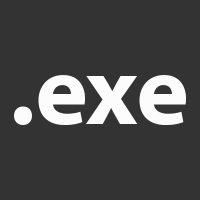
<style>
.page{position:relative;width:200px;height:200px;background:#333333}
.page>*{position:absolute;margin:0}
.t1{font:100px "MyriadPro-Bold";color:#fdfcfc}
</style>
<div class="page">
<p class="t1" style="left:14px;top:75px;width:172px;height:50px">.exe</p>
</div>
